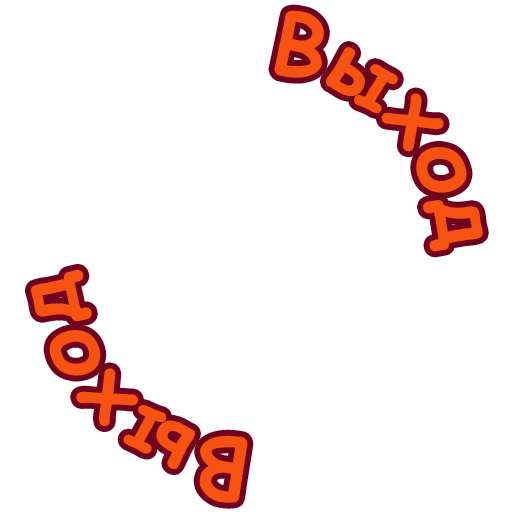
<style>
.page{position:relative;width:512px;height:512px;background:#ffffff}
.page>*{position:absolute;margin:0}
.t1{font:85px "ComicSansMS-Bold";color:#f65313}
</style>
<div class="page">
<p class="t1" style="left:31px;top:10px;width:452px;height:493px">Выход        Выход</p>
</div>
